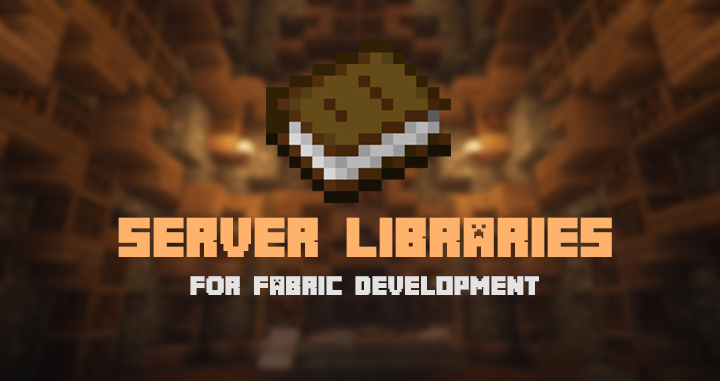
<style>
.page{position:relative;width:720px;height:381px}
.page>*{position:absolute;margin:0}
.t1{font:50px "Minecrafter";color:#ffb26c}
.t2{font:24px "Minecrafter";color:#e3e3e3}
</style>
<div class="page">
<p class="t1" style="left:118px;top:217px;width:494px;height:40px">Server Libraries</p>
<p class="t2" style="left:190px;top:276px;width:349px;height:19px">FOr Fabric Development</p>
</div>
